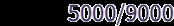
<style>
.page{position:relative;width:174px;height:26px;background:#000000}
.page>*{position:absolute;margin:0}
.t1{font:22px "WebPSD-18463539-0-Regular";color:#3f3254;font-weight:bold}
</style>
<div class="page">
<p class="t1" style="left:0px;top:0px;width:174px;height:26px">5000/9000</p>
</div>
